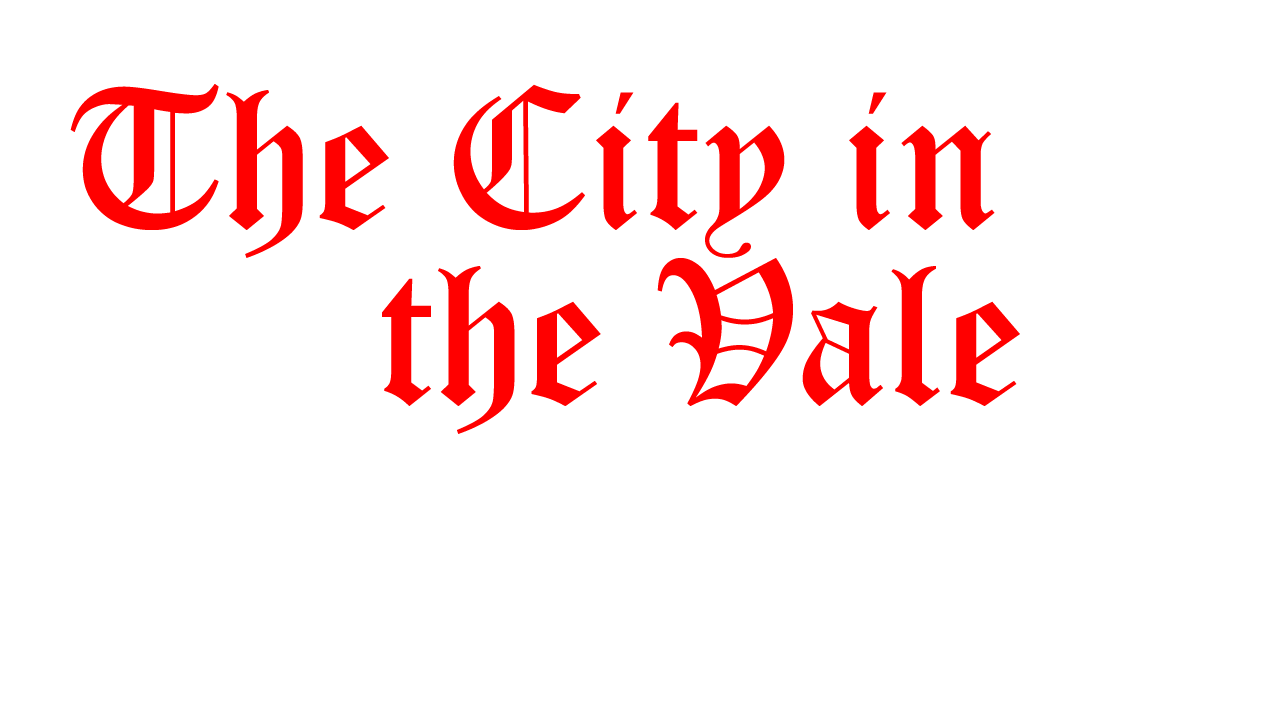
<style>
.page{position:relative;width:1280px;height:720px;background:#ffffff}
.page>*{position:absolute;margin:0}
.t1{font:200px "OldEnglishTextMT";color:#ff0000}
</style>
<div class="page">
<p class="t1" style="left:70px;top:84px;width:925px;height:174px">The City in</p>
<p class="t1" style="left:382px;top:258px;width:638px;height:176px">the Vale</p>
</div>
